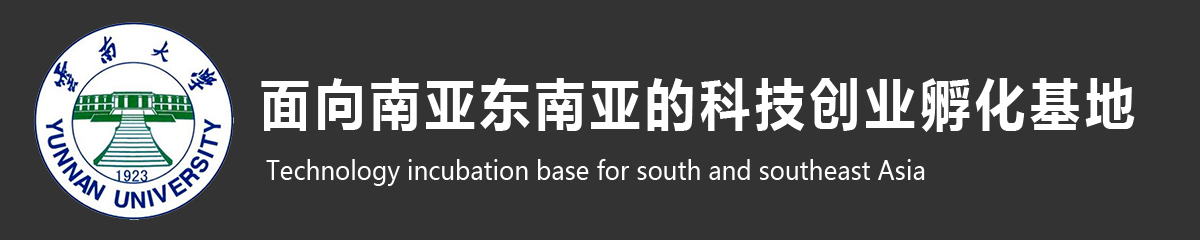
<style>
.page{position:relative;width:1200px;height:240px;background:#333333}
.page>*{position:absolute;margin:0}
.t1{font:55px "MicrosoftYaHei-Bold";letter-spacing:0.1em;color:#ffffff;scale:0.91 1}
.t2{font:26.4px "MicrosoftYaHei";color:#ffffff;scale:0.91 1}
</style>
<div class="page">
<p class="t1" style="left:261px;top:78px;width:874px;height:54px">面向南亚东南亚的科技创业孵化基地</p>
<p class="t2" style="left:266px;top:159px;width:659px;height:27px">Technology incubation base for south and southeast Asia</p>
</div>
